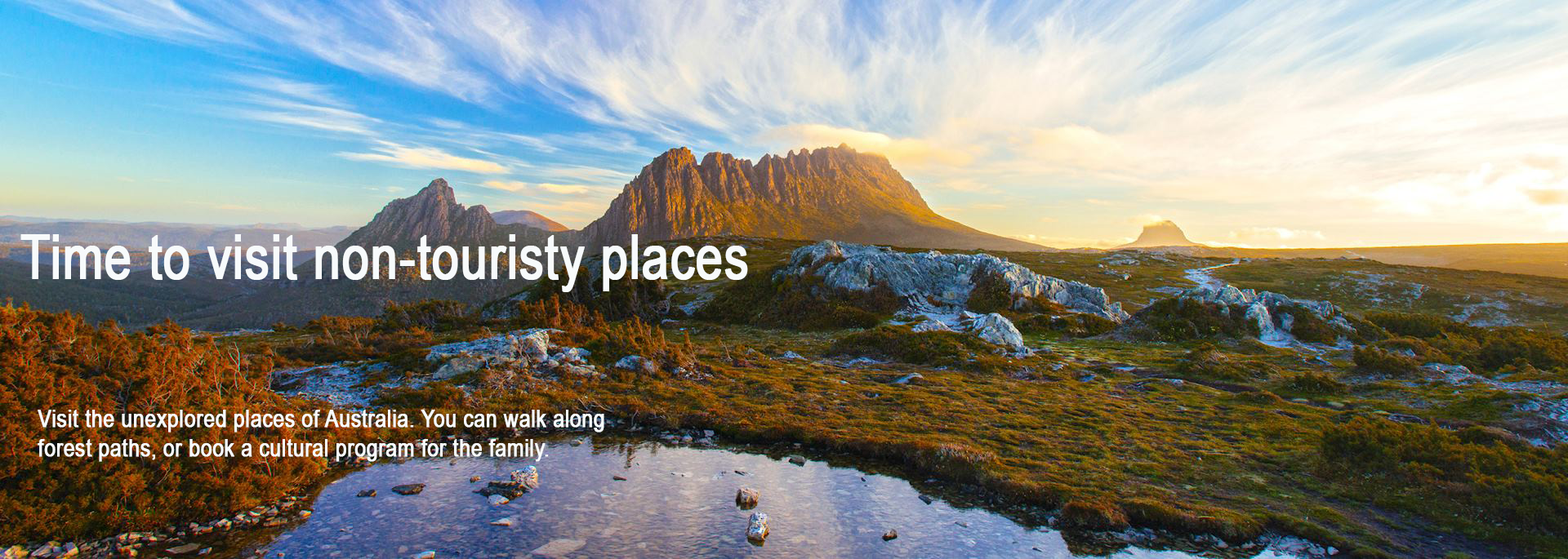
<style>
.page{position:relative;width:1568px;height:559px}
.page>*{position:absolute;margin:0}
.t1{font:62.1px "ArialNarrow";color:#f7fafb;font-weight:bold;scale:0.95 1}
.t2{font:24.5px "ArialNarrow";color:#f7fafb;font-weight:bold}
</style>
<div class="page">
<p class="t1" style="left:20px;top:234px;width:728px;height:58px">Time to visit non-touristy places</p>
<p class="t2" style="left:38px;top:410px;width:566px;height:52px">Visit the unexplored places of Australia. You can walk along forest paths, or book a cultural program for the family.</p>
</div>
